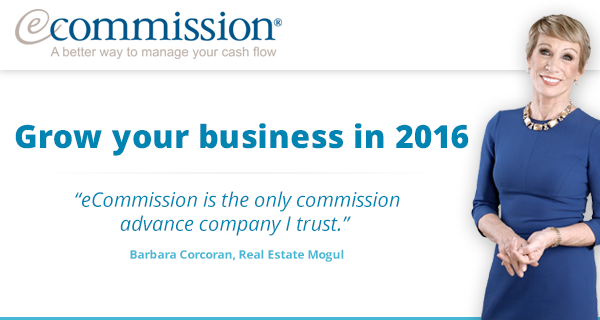
<style>
.page{position:relative;width:600px;height:320px;background:#ffffff}
.page>*{position:absolute;margin:0}
.t1{font:32.1px "OpenSans-Extrabold";color:#0085b2}
.t2{font:20px "OpenSans-Italic";color:#0085b2}
.t3{font:12px "OpenSans-Bold";color:#46b7d5}
</style>
<div class="page">
<p class="t1" style="left:15px;top:123px;width:454px;height:33px">Grow your business in 2016</p>
<p class="t2" style="left:75px;top:191px;width:325px;height:45px;text-align:center">“eCommission is the only commission<br>advance company I trust.”</p>
<p class="t3" style="left:130px;top:249px;width:214px;height:13px">Barbara Corcoran, Real Estate Mogul</p>
</div>
